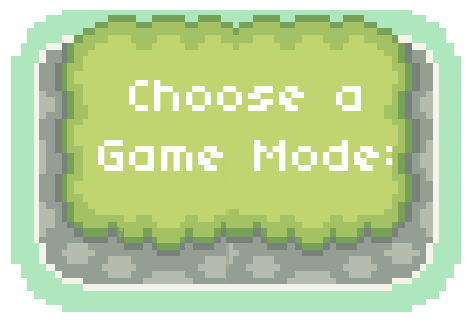
<style>
.page{position:relative;width:474px;height:324px;background:#c0d470}
.page>*{position:absolute;margin:0}
.t1{font:50px "04b03";color:#ffffff}
</style>
<div class="page">
<p class="t1" style="left:98px;top:80px;width:295px;height:91px;text-align:center">Choose a<br>Game Mode:</p>
</div>
